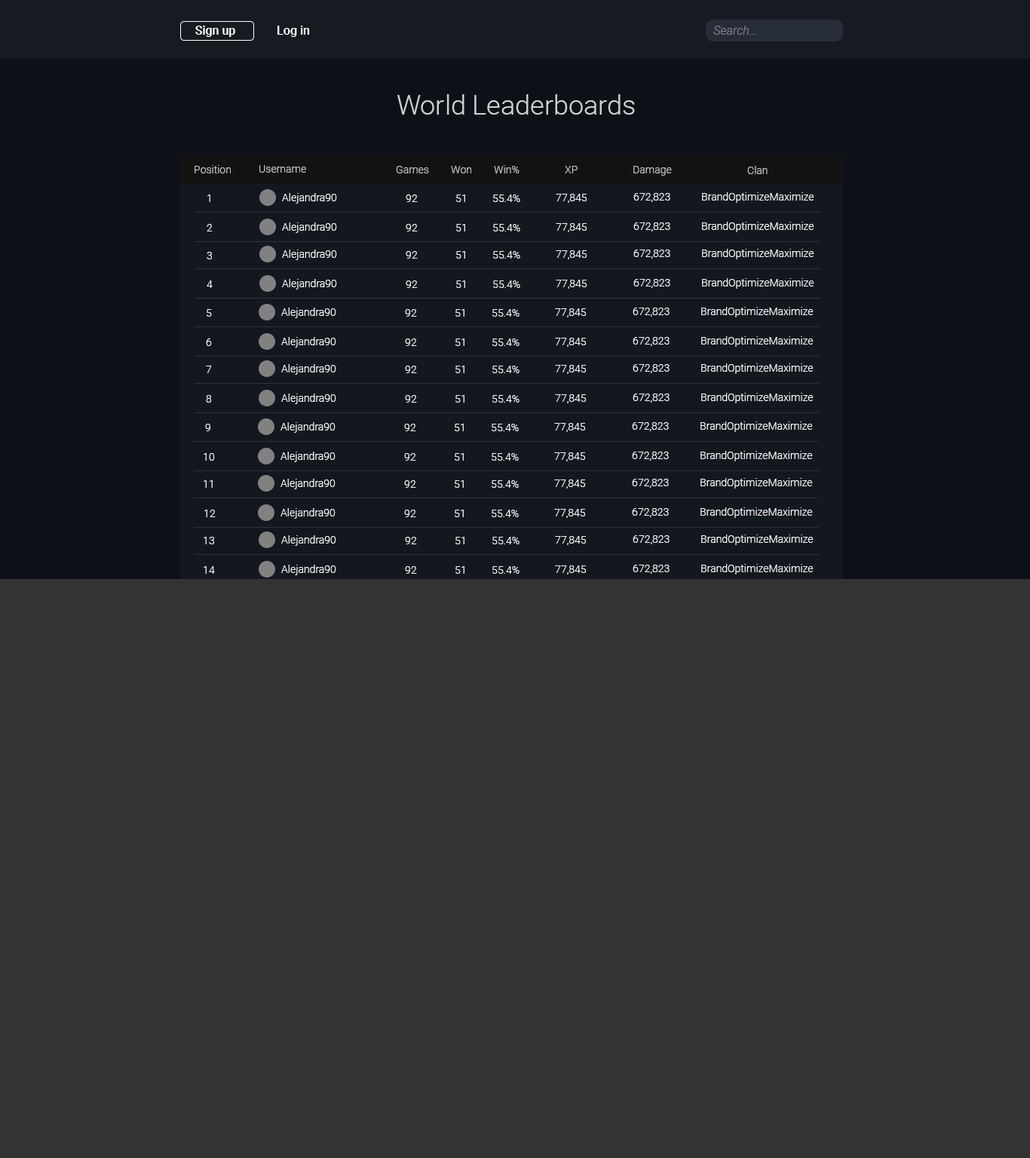
<style>
.page{position:relative;width:1030px;height:1158px;background:#333333}
.page>*{position:absolute;margin:0}
.t1{font:12.1px "Roboto-Medium";color:#ffffff}
.t2{font:12.1px "Roboto-LightItalic";color:#808283}
.t3{font:27.1px "Roboto-Light";color:#d0d1d2}
.t4{font:10.6px "Roboto-Light";color:#c0c3c6}
.t5{font:10.6px "Roboto-Light";color:#f4f4f4}
</style>
<div class="page">
<p class="t1" style="left:195px;top:26px;width:40px;height:11px">Sign up</p>
<p class="t1" style="left:277px;top:26px;width:33px;height:11px">Log in</p>
<p class="t2" style="left:713px;top:26px;width:44px;height:9px">Search...</p>
<p class="t3" style="left:397px;top:94px;width:238px;height:21px">World Leaderboards</p>
<p class="t4" style="left:194px;top:165px;width:37px;height:8px">Position</p>
<p class="t4" style="left:259px;top:165px;width:47px;height:8px">Username</p>
<p class="t4" style="left:396px;top:166px;width:33px;height:7px">Games</p>
<p class="t4" style="left:451px;top:166px;width:20px;height:7px">Won</p>
<p class="t4" style="left:494px;top:165px;width:25px;height:8px">Win%</p>
<p class="t4" style="left:565px;top:166px;width:12px;height:7px">XP</p>
<p class="t4" style="left:633px;top:166px;width:39px;height:10px">Damage</p>
<p class="t4" style="left:747px;top:166px;width:20px;height:8px">Clan</p>
<p class="t5" style="left:207px;top:194px;width:3px;height:8px">1</p>
<p class="t5" style="left:282px;top:193px;width:55px;height:11px">Alejandra90</p>
<p class="t5" style="left:406px;top:194px;width:12px;height:8px">92</p>
<p class="t5" style="left:456px;top:194px;width:9px;height:8px">51</p>
<p class="t5" style="left:493px;top:194px;width:27px;height:8px">55.4%</p>
<p class="t5" style="left:556px;top:194px;width:31px;height:9px">77,845</p>
<p class="t5" style="left:633px;top:193px;width:37px;height:9px">672,823</p>
<p class="t5" style="left:702px;top:192px;width:112px;height:11px">BrandOptimizeMaximize</p>
<p class="t5" style="left:702px;top:222px;width:112px;height:10px">BrandOptimizeMaximize</p>
<p class="t5" style="left:207px;top:224px;width:6px;height:7px">2</p>
<p class="t5" style="left:282px;top:222px;width:55px;height:11px">Alejandra90</p>
<p class="t5" style="left:406px;top:224px;width:12px;height:7px">92</p>
<p class="t5" style="left:456px;top:224px;width:9px;height:7px">51</p>
<p class="t5" style="left:493px;top:224px;width:27px;height:7px">55.4%</p>
<p class="t5" style="left:556px;top:223px;width:31px;height:9px">77,845</p>
<p class="t5" style="left:633px;top:222px;width:37px;height:9px">672,823</p>
<p class="t5" style="left:207px;top:252px;width:5px;height:7px">3</p>
<p class="t5" style="left:282px;top:250px;width:55px;height:10px">Alejandra90</p>
<p class="t5" style="left:406px;top:251px;width:12px;height:8px">92</p>
<p class="t5" style="left:456px;top:251px;width:9px;height:8px">51</p>
<p class="t5" style="left:493px;top:251px;width:27px;height:8px">55.4%</p>
<p class="t5" style="left:556px;top:250px;width:31px;height:9px">77,845</p>
<p class="t5" style="left:633px;top:250px;width:37px;height:9px">672,823</p>
<p class="t5" style="left:702px;top:249px;width:112px;height:10px">BrandOptimizeMaximize</p>
<p class="t5" style="left:207px;top:280px;width:6px;height:8px">4</p>
<p class="t5" style="left:282px;top:279px;width:55px;height:10px">Alejandra90</p>
<p class="t5" style="left:406px;top:280px;width:12px;height:8px">92</p>
<p class="t5" style="left:456px;top:280px;width:9px;height:8px">51</p>
<p class="t5" style="left:493px;top:280px;width:27px;height:8px">55.4%</p>
<p class="t5" style="left:556px;top:280px;width:31px;height:9px">77,845</p>
<p class="t5" style="left:633px;top:279px;width:37px;height:9px">672,823</p>
<p class="t5" style="left:702px;top:278px;width:112px;height:11px">BrandOptimizeMaximize</p>
<p class="t5" style="left:207px;top:309px;width:5px;height:8px">5</p>
<p class="t5" style="left:281px;top:308px;width:55px;height:10px">Alejandra90</p>
<p class="t5" style="left:405px;top:309px;width:12px;height:8px">92</p>
<p class="t5" style="left:455px;top:309px;width:9px;height:8px">51</p>
<p class="t5" style="left:492px;top:309px;width:27px;height:8px">55.4%</p>
<p class="t5" style="left:555px;top:308px;width:31px;height:9px">77,845</p>
<p class="t5" style="left:632px;top:308px;width:37px;height:9px">672,823</p>
<p class="t5" style="left:701px;top:307px;width:112px;height:10px">BrandOptimizeMaximize</p>
<p class="t5" style="left:206px;top:338px;width:6px;height:8px">6</p>
<p class="t5" style="left:281px;top:337px;width:55px;height:11px">Alejandra90</p>
<p class="t5" style="left:405px;top:338px;width:12px;height:8px">92</p>
<p class="t5" style="left:455px;top:338px;width:9px;height:8px">51</p>
<p class="t5" style="left:492px;top:338px;width:27px;height:8px">55.4%</p>
<p class="t5" style="left:555px;top:338px;width:31px;height:9px">77,845</p>
<p class="t5" style="left:632px;top:337px;width:37px;height:9px">672,823</p>
<p class="t5" style="left:701px;top:336px;width:112px;height:11px">BrandOptimizeMaximize</p>
<p class="t5" style="left:206px;top:366px;width:6px;height:7px">7</p>
<p class="t5" style="left:281px;top:364px;width:55px;height:11px">Alejandra90</p>
<p class="t5" style="left:405px;top:366px;width:12px;height:7px">92</p>
<p class="t5" style="left:455px;top:366px;width:9px;height:7px">51</p>
<p class="t5" style="left:492px;top:366px;width:27px;height:7px">55.4%</p>
<p class="t5" style="left:555px;top:365px;width:31px;height:9px">77,845</p>
<p class="t5" style="left:632px;top:364px;width:37px;height:9px">672,823</p>
<p class="t5" style="left:701px;top:363px;width:112px;height:11px">BrandOptimizeMaximize</p>
<p class="t5" style="left:206px;top:395px;width:6px;height:8px">8</p>
<p class="t5" style="left:281px;top:394px;width:55px;height:10px">Alejandra90</p>
<p class="t5" style="left:405px;top:395px;width:12px;height:8px">92</p>
<p class="t5" style="left:455px;top:395px;width:9px;height:8px">51</p>
<p class="t5" style="left:492px;top:395px;width:27px;height:8px">55.4%</p>
<p class="t5" style="left:555px;top:394px;width:31px;height:9px">77,845</p>
<p class="t5" style="left:632px;top:394px;width:37px;height:9px">672,823</p>
<p class="t5" style="left:701px;top:393px;width:112px;height:10px">BrandOptimizeMaximize</p>
<p class="t5" style="left:205px;top:424px;width:5px;height:7px">9</p>
<p class="t5" style="left:280px;top:422px;width:55px;height:11px">Alejandra90</p>
<p class="t5" style="left:404px;top:424px;width:12px;height:7px">92</p>
<p class="t5" style="left:455px;top:424px;width:9px;height:7px">51</p>
<p class="t5" style="left:492px;top:424px;width:27px;height:7px">55.4%</p>
<p class="t5" style="left:554px;top:423px;width:31px;height:9px">77,845</p>
<p class="t5" style="left:632px;top:422px;width:37px;height:9px">672,823</p>
<p class="t5" style="left:700px;top:421px;width:113px;height:11px">BrandOptimizeMaximize</p>
<p class="t5" style="left:204px;top:453px;width:11px;height:8px">10</p>
<p class="t5" style="left:280px;top:452px;width:55px;height:10px">Alejandra90</p>
<p class="t5" style="left:404px;top:453px;width:12px;height:8px">92</p>
<p class="t5" style="left:455px;top:453px;width:9px;height:8px">51</p>
<p class="t5" style="left:492px;top:453px;width:27px;height:8px">55.4%</p>
<p class="t5" style="left:554px;top:452px;width:31px;height:9px">77,845</p>
<p class="t5" style="left:632px;top:452px;width:37px;height:9px">672,823</p>
<p class="t5" style="left:700px;top:451px;width:113px;height:10px">BrandOptimizeMaximize</p>
<p class="t5" style="left:204px;top:480px;width:9px;height:8px">11</p>
<p class="t5" style="left:280px;top:479px;width:55px;height:10px">Alejandra90</p>
<p class="t5" style="left:404px;top:480px;width:12px;height:8px">92</p>
<p class="t5" style="left:455px;top:480px;width:9px;height:8px">51</p>
<p class="t5" style="left:492px;top:480px;width:27px;height:8px">55.4%</p>
<p class="t5" style="left:554px;top:479px;width:31px;height:10px">77,845</p>
<p class="t5" style="left:632px;top:479px;width:37px;height:9px">672,823</p>
<p class="t5" style="left:700px;top:478px;width:113px;height:11px">BrandOptimizeMaximize</p>
<p class="t5" style="left:204px;top:510px;width:12px;height:7px">12</p>
<p class="t5" style="left:280px;top:508px;width:55px;height:11px">Alejandra90</p>
<p class="t5" style="left:404px;top:510px;width:12px;height:7px">92</p>
<p class="t5" style="left:455px;top:510px;width:9px;height:7px">51</p>
<p class="t5" style="left:492px;top:510px;width:27px;height:7px">55.4%</p>
<p class="t5" style="left:554px;top:509px;width:31px;height:9px">77,845</p>
<p class="t5" style="left:632px;top:508px;width:37px;height:9px">672,823</p>
<p class="t5" style="left:700px;top:507px;width:113px;height:11px">BrandOptimizeMaximize</p>
<p class="t5" style="left:204px;top:537px;width:10px;height:7px">13</p>
<p class="t5" style="left:281px;top:535px;width:55px;height:11px">Alejandra90</p>
<p class="t5" style="left:405px;top:537px;width:12px;height:7px">92</p>
<p class="t5" style="left:455px;top:537px;width:9px;height:7px">51</p>
<p class="t5" style="left:492px;top:537px;width:27px;height:7px">55.4%</p>
<p class="t5" style="left:555px;top:536px;width:31px;height:9px">77,845</p>
<p class="t5" style="left:632px;top:535px;width:37px;height:9px">672,823</p>
<p class="t5" style="left:701px;top:534px;width:112px;height:11px">BrandOptimizeMaximize</p>
<p class="t5" style="left:204px;top:566px;width:11px;height:8px">14</p>
<p class="t5" style="left:281px;top:565px;width:55px;height:10px">Alejandra90</p>
<p class="t5" style="left:405px;top:566px;width:12px;height:8px">92</p>
<p class="t5" style="left:455px;top:566px;width:9px;height:8px">51</p>
<p class="t5" style="left:492px;top:566px;width:27px;height:8px">55.4%</p>
<p class="t5" style="left:555px;top:565px;width:31px;height:9px">77,845</p>
<p class="t5" style="left:632px;top:565px;width:37px;height:9px">672,823</p>
<p class="t5" style="left:701px;top:564px;width:112px;height:10px">BrandOptimizeMaximize</p>
</div>
